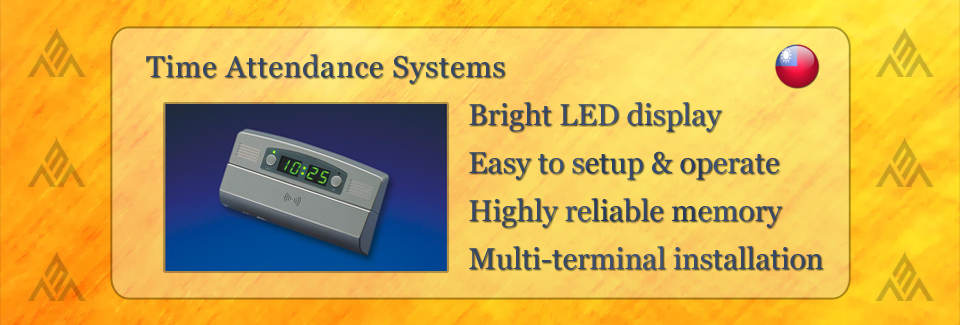
<style>
.page{position:relative;width:960px;height:325px}
.page>*{position:absolute;margin:0}
.t1{font:30px "Georgia";letter-spacing:0.025em;color:#364866}
.t2{font:30px/48px "Georgia";color:#364868}
</style>
<div class="page">
<p class="t1" style="left:146px;top:54px;width:359px;height:30px">Time Attendance Systems</p>
<p class="t2" style="left:469px;top:102px;width:354px;height:168px">Bright LED display<br>Easy to setup &amp; operate<br>Highly reliable memory<br>Multi-terminal installation</p>
</div>
